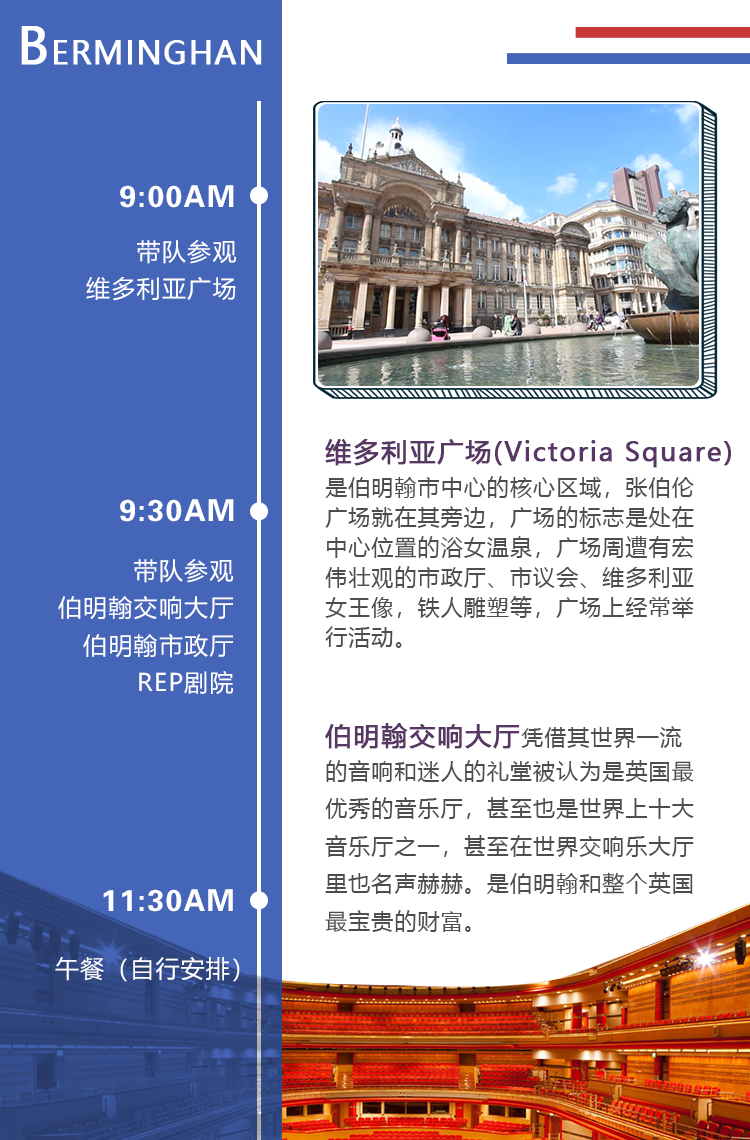
<style>
.page{position:relative;width:750px;height:1140px;background:#ffffff}
.page>*{position:absolute;margin:0}
.t1{font:30.5px "MicrosoftYaHei";letter-spacing:0.05em;color:#ffffff;font-weight:bold}
.t2{font:48.8px "MicrosoftYaHei";letter-spacing:0.05em;color:#ffffff;font-weight:bold}
.t3{font:29.9px "FZZYJW--GB1-0";letter-spacing:0.05em;color:#ffffff}
.t4{font:23.9px/37.4px "MicrosoftYaHei";letter-spacing:0.05em;color:#ffffff}
.t5{font:22px/30px "MicrosoftYaHei";letter-spacing:0.05em;color:#4d4d4d}
.t6{font:26px/37.5px "MicrosoftYaHei";letter-spacing:0.05em;color:#593764;font-weight:bold}
.t7{font:24px/37.4px "MicrosoftYaHei";letter-spacing:0.05em;color:#ffffff}
.t8{font:22px/37.5px "MicrosoftYaHei";letter-spacing:0.05em;color:#4d4d4d}
.t9{font:24px "MicrosoftYaHei";letter-spacing:0.05em;color:#ffffff}
</style>
<div class="page">
<p class="t1" style="left:21px;top:26px;width:241px;height:39px"><span class="t2">B</span>ERMINGHAN</p>
<p class="t3" style="left:120px;top:185px;width:114px;height:23px">9:00AM</p>
<p class="t4" style="left:86px;top:240px;width:151px;height:61px;text-align:right">带队参观<br>维多利亚广场</p>
<p class="t5" style="left:325px;top:439px;width:406px;height:209px"><span class="t6">维多利亚广场(Victoria Square)<br></span>是伯明翰市中心的核心区域，张伯伦<br>广场就在其旁边，广场的标志是处在<br>中心位置的浴女温泉，广场周遭有宏<br>伟壮观的市政厅、市议会、维多利亚<br>女王像，铁人雕塑等，广场上经常举<br>行活动。</p>
<p class="t3" style="left:120px;top:499px;width:114px;height:23px">9:30AM</p>
<p class="t7" style="left:58px;top:559px;width:176px;height:135px;text-align:right">带队参观<br>伯明翰交响大厅<br>伯明翰市政厅<br>REP剧院</p>
<p class="t8" style="left:325px;top:723px;width:369px;height:209px"><span class="t6">伯明翰交响大厅</span>凭借其世界一流的音响和迷人的礼堂被认为是英国最优秀的音乐厅，甚至也是世界上十大音乐厅之一，甚至在世界交响乐大厅里也名声赫赫。是伯明翰和整个英国最宝贵的财富。</p>
<p class="t3" style="left:103px;top:889px;width:130px;height:23px">11:30AM</p>
<p class="t9" style="left:55px;top:956px;width:185px;height:26px">午餐（自行安排）</p>
</div>
